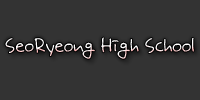
<style>
.page{position:relative;width:200px;height:100px;background:#333333}
.page>*{position:absolute;margin:0}
.t1{font:20px "Æ÷Æ¼Ã¼ - Poty.pe.kr";color:#ffffff}
</style>
<div class="page">
<p class="t1" style="left:5px;top:37px;width:189px;height:22px">SeoRyeong High School</p>
</div>
